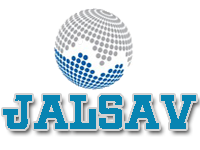
<style>
.page{position:relative;width:200px;height:150px;background:#ffffff}
.page>*{position:absolute;margin:0}
.t1{font:57.4px "BoiledDenim";color:#0784b2;text-transform:uppercase;font-weight:bold}
</style>
<div class="page">
<p class="t1" style="left:3px;top:95px;width:193px;height:34px">Jalsav</p>
</div>
